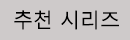
<style>
.page{position:relative;width:130px;height:40px;background:#cecaca}
.page>*{position:absolute;margin:0}
.t1{font:20px "MalgunGothicRegular";color:#000000}
</style>
<div class="page">
<p class="t1" style="left:14px;top:10px;width:105px;height:20px">추천 시리즈</p>
</div>
